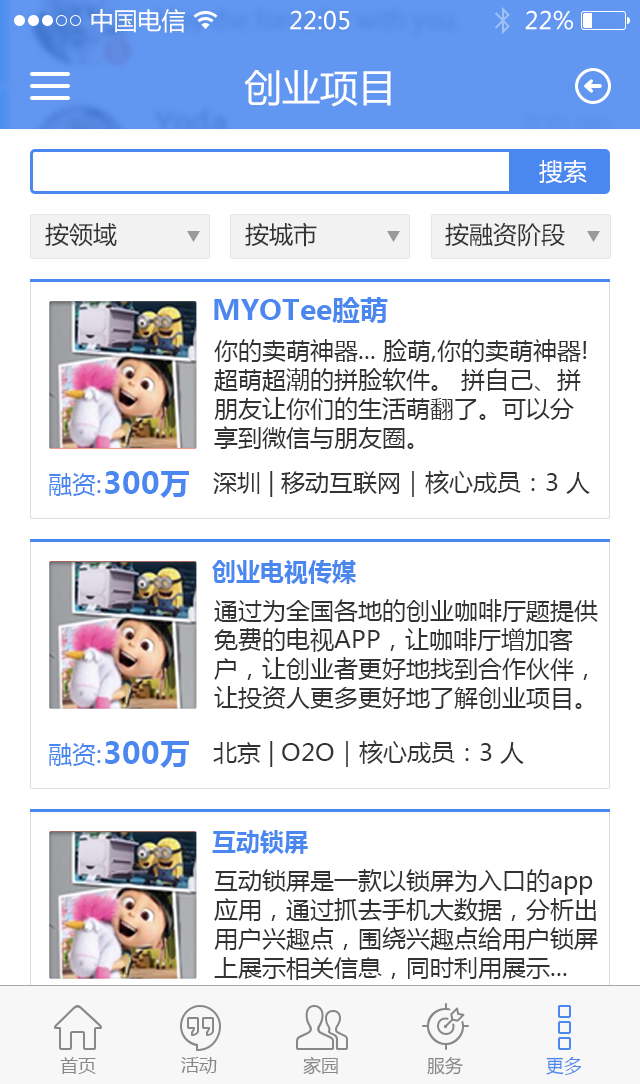
<style>
.page{position:relative;width:640px;height:1084px;background:#ffffff}
.page>*{position:absolute;margin:0}
.t1{font:24px "MicrosoftYaHei";color:#ffffff}
.t2{font:38px "MicrosoftYaHei";color:#ffffff}
.t3{font:24px "MicrosoftYaHei";color:#fffefe}
.t4{font:24px "MicrosoftYaHei";color:#333333}
.t5{font:28px "MicrosoftYaHei-Bold";color:#4a87ee}
.t6{font:24px "MicrosoftYaHei";color:#4a87ee}
.t7{font:30px "MicrosoftYaHei-Bold";color:#4a87ee}
.t8{font:24px "MicrosoftYaHei-Bold";color:#4a87ee}
.t9{font:18px "MicrosoftYaHei";color:#888888}
.t10{font:18px "MicrosoftYaHei";color:#4a87ee}
</style>
<div class="page">
<p class="t1" style="left:91px;top:9px;width:94px;height:24px">中国电信</p>
<p class="t1" style="left:290px;top:10px;width:60px;height:20px">22:05</p>
<p class="t1" style="left:525px;top:10px;width:48px;height:20px">22%</p>
<p class="t2" style="left:244px;top:70px;width:147px;height:37px">创业项目</p>
<p class="t3" style="left:539px;top:160px;width:48px;height:24px">搜索</p>
<p class="t4" style="left:245px;top:222px;width:72px;height:25px">按城市</p>
<p class="t4" style="left:445px;top:222px;width:120px;height:25px">按融资阶段</p>
<p class="t4" style="left:45px;top:223px;width:72px;height:24px">按领域</p>
<p class="t5" style="left:214px;top:297px;width:174px;height:26px">MYOTee脸萌</p>
<p class="t4" style="left:214px;top:339px;width:373px;height:110px">你的卖萌神器... 脸萌,你的卖萌神器!超萌超潮的拼脸软件。 拼自己、拼朋友让你们的生活萌翻了。可以分享到微信与朋友圈。</p>
<p class="t6" style="left:49px;top:473px;width:52px;height:23px">融资:</p>
<p class="t7" style="left:105px;top:471px;width:84px;height:27px">300万</p>
<p class="t4" style="left:213px;top:470px;width:377px;height:27px">深圳 | 移动互联网｜核心成员：3 人</p>
<p class="t8" style="left:212px;top:560px;width:144px;height:24px">创业电视传媒</p>
<p class="t4" style="left:214px;top:599px;width:384px;height:111px">通过为全国各地的创业咖啡厅题提供免费的电视APP，让咖啡厅增加客户，让创业者更好地找到合作伙伴，让投资人更多更好地了解创业项目。</p>
<p class="t6" style="left:49px;top:743px;width:52px;height:23px">融资:</p>
<p class="t7" style="left:105px;top:741px;width:84px;height:27px">300万</p>
<p class="t4" style="left:213px;top:740px;width:311px;height:27px">北京 | O2O｜核心成员：3 人</p>
<p class="t8" style="left:212px;top:830px;width:96px;height:24px">互动锁屏</p>
<p class="t4" style="left:214px;top:869px;width:384px;height:111px">互动锁屏是一款以锁屏为入口的app应用，通过抓去手机大数据，分析出用户兴趣点，围绕兴趣点给用户锁屏上展示相关信息，同时利用展示...</p>
<p class="t9" style="left:60px;top:1057px;width:36px;height:17px">首页</p>
<p class="t9" style="left:181px;top:1057px;width:36px;height:17px">活动</p>
<p class="t9" style="left:303px;top:1056px;width:35px;height:19px">家园</p>
<p class="t9" style="left:427px;top:1056px;width:36px;height:19px">服务</p>
<p class="t10" style="left:546px;top:1057px;width:35px;height:18px">更多</p>
</div>
